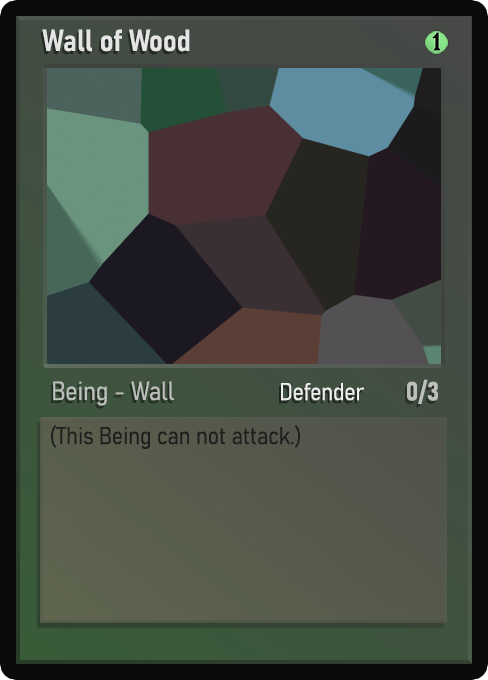
<style>
.page{position:relative;width:488px;height:680px}
.page>*{position:absolute;margin:0}
.t1{font:30px "Bahnschrift-SemiBoldSemiCondensed";color:#f2f2f2;font-weight:bold}
.t2{font:25px "WTRRoycroft";color:#000000;font-weight:bold;scale:1.09 1}
.t3{font:26px "Bahnschrift-LightSemiCondensed";color:#c8c8c8;font-weight:bold}
.t4{font:24px "Bahnschrift-LightSemiCondensed";color:#f0efef;font-weight:bold}
.t5{font:26px "Bahnschrift-BoldSemiCondensed";color:#bdbfbd;font-weight:bold}
.t6{font:24px "Bahnschrift-LightSemiCondensed";color:#1e1e1e;font-weight:bold}
</style>
<div class="page">
<p class="t1" style="left:42px;top:29px;width:148px;height:23px;opacity:0.9">Wall of Wood</p>
<p class="t2" style="left:432px;top:32px;width:9px;height:19px">1</p>
<p class="t3" style="left:53px;top:381px;width:121px;height:25px;opacity:0.9">Being - Wall</p>
<p class="t4" style="left:281px;top:383px;width:84px;height:18px">Defender</p>
<p class="t5" style="left:407px;top:379px;width:31px;height:25px">0/3</p>
<p class="t6" style="left:51px;top:425px;width:249px;height:24px">(This Being can not attack.)</p>
</div>
